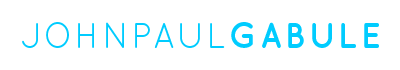
<style>
.page{position:relative;width:400px;height:70px;background:#ffffff}
.page>*{position:absolute;margin:0}
.t1{font:36px "Quicksand-Regular";letter-spacing:0.1em;color:#00ccff;scale:0.94 1}
.t2{font:36px "Quicksand-Bold";letter-spacing:0.1em;color:#00ccff;scale:0.94 1}
</style>
<div class="page">
<p class="t1" style="left:22px;top:22px;width:357px;height:26px">JOHNPAUL<span class="t2">GABULE</span></p>
</div>
